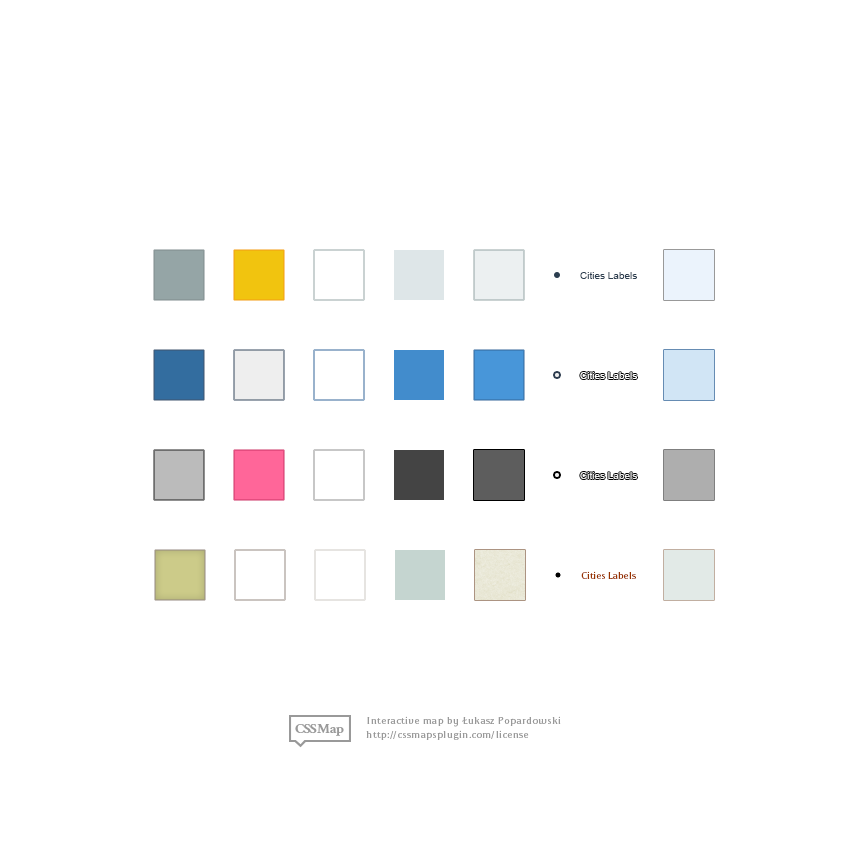
<style>
.page{position:relative;width:850px;height:850px;background:#ffffff}
.page>*{position:absolute;margin:0}
.t1{font:10px "ArialMT";color:#2c3e50}
.t2{font:10px "ArialMT";color:#ffffff}
.t3{font:10px "ArialMT";color:#eeeeee}
.t4{font:10px "Apolonia";color:#993300}
</style>
<div class="page">
<p class="t1" style="left:580px;top:272px;width:57px;height:7px">Cities Labels</p>
<p class="t2" style="left:580px;top:372px;width:57px;height:7px">Cities Labels</p>
<p class="t3" style="left:580px;top:472px;width:57px;height:7px">Cities Labels</p>
<p class="t4" style="left:581px;top:571px;width:55px;height:8px">Cities Labels</p>
</div>
